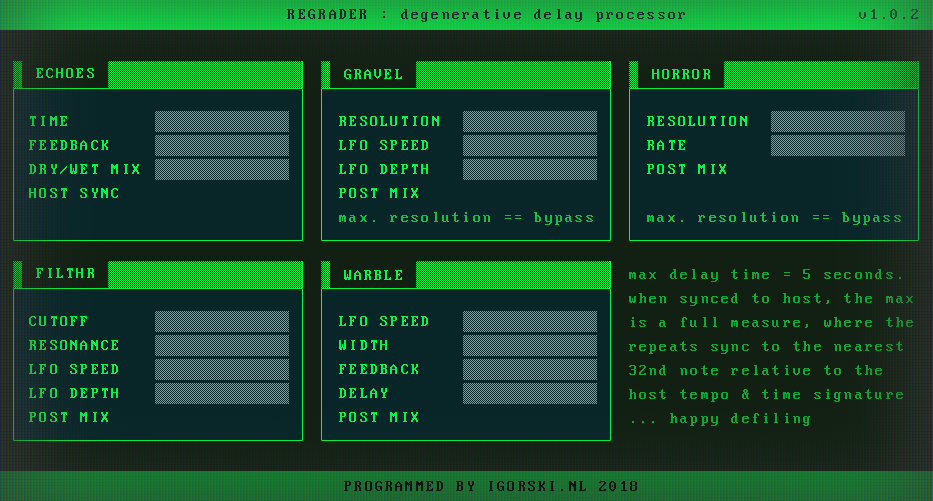
<style>
.page{position:relative;width:933px;height:501px;background:#082628}
.page>*{position:absolute;margin:0}
.t1{font:16px "PerfectDOSVGA437";letter-spacing:0.08em;color:#082628}
.t2{font:16px "PerfectDOSVGA437";letter-spacing:0.08em;color:#194b31}
.t3{font:16px "PerfectDOSVGA437";letter-spacing:0.08em;color:#09f447}
.t4{font:16px/24px "PerfectDOSVGA437";letter-spacing:0.08em;color:#09f447}
.t5{font:16px/24px "PerfectDOSVGA437";letter-spacing:0.08em;color:#17c043}
.t6{font:16px/24px "PerfectDOSVGA437";letter-spacing:0.08em;color:#0caa35}
.t7{font:16px "PerfectDOSVGA437";letter-spacing:0.075em;color:#0f0f10}
</style>
<div class="page">
<p class="t1" style="left:287px;top:9px;width:398px;height:13px">REGRADER : degenerative delay processor</p>
<p class="t2" style="left:859px;top:9px;width:59px;height:10px">v1.0.2</p>
<p class="t3" style="left:36px;top:68px;width:58px;height:10px">ECHOES</p>
<p class="t3" style="left:344px;top:69px;width:58px;height:10px">GRAVEL</p>
<p class="t3" style="left:652px;top:69px;width:58px;height:10px">HORROR</p>
<p class="t4" style="left:29px;top:116px;width:110px;height:82px">TIME<br>FEEDBACK<br>DRY/WET MIX<br>HOST SYNC</p>
<p class="t4" style="left:339px;top:116px;width:254px;height:109px">RESOLUTION<br>LFO SPEED<br>LFO DEPTH<br>POST MIX<br><span class="t5">max. resolution == bypass</span></p>
<p class="t5" style="left:647px;top:116px;width:254px;height:109px"><span class="t4">RESOLUTION<br>RATE<br>POST MIX<br><br></span>max. resolution == bypass</p>
<p class="t3" style="left:36px;top:268px;width:58px;height:10px">FILTHR</p>
<p class="t3" style="left:344px;top:270px;width:58px;height:10px">WARBLE</p>
<p class="t6" style="left:629px;top:269px;width:284px;height:157px">max delay time = 5 seconds.<br>when synced to host, the max<br>is a full measure, where the<br>repeats sync to the nearest<br>32nd note relative to the<br>host tempo &amp; time signature<br>... happy defiling</p>
<p class="t4" style="left:29px;top:316px;width:89px;height:106px">CUTOFF<br>RESONANCE<br>LFO SPEED<br>LFO DEPTH<br>POST MIX</p>
<p class="t4" style="left:339px;top:316px;width:89px;height:106px">LFO SPEED<br>WIDTH<br>FEEDBACK<br>DELAY<br>POST MIX</p>
<p class="t7" style="left:344px;top:481px;width:293px;height:10px">PROGRAMMED BY IGORSKI.NL 2018</p>
</div>
